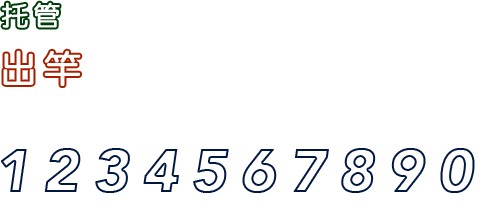
<style>
.page{position:relative;width:500px;height:211px;background:#ffffff}
.page>*{position:absolute;margin:0}
.t1{font:26px "STYuanti-SC-Regular";letter-spacing:0.2em;color:#ffffff;font-weight:bold}
.t2{font:36px "STYuanti-SC-Regular";letter-spacing:0.2em;color:#ffffff;font-weight:bold}
.t3{font:60px "Avenir-BlackOblique";letter-spacing:0.2em;color:#ffffff;font-weight:bold}
</style>
<div class="page">
<p class="t1" style="left:2px;top:2px;width:58px;height:26px">托管</p>
<p class="t2" style="left:3px;top:50px;width:78px;height:36px">出竿</p>
<p class="t3" style="left:1px;top:148px;width:474px;height:45px">1234567890</p>
</div>
